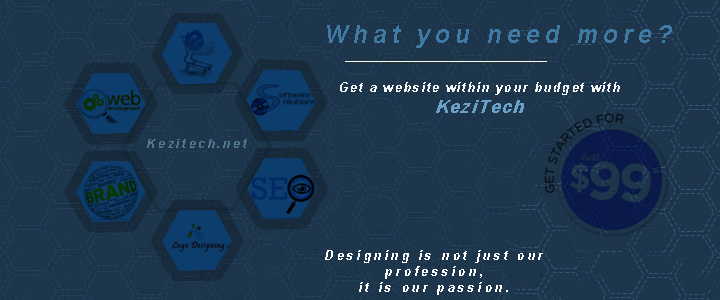
<style>
.page{position:relative;width:720px;height:300px;background:#1d364c}
.page>*{position:absolute;margin:0}
.t1{font:25px "Arial-BoldMT";letter-spacing:0.2em;color:#4079a1;font-style:italic}
.t2{font:13.2px "Arial-BoldMT";letter-spacing:0.1em;color:#f8f8f8;font-style:italic}
.t3{font:17.6px "Arial-BoldItalicMT";letter-spacing:0.1em;color:#6ba1c7;font-style:italic}
.t4{font:12.3px "Arial-BoldMT";letter-spacing:0.2em;color:#52768b;font-style:italic}
.t5{font:13.3px "Arial-BoldMT";letter-spacing:0.2em;color:#ffffff;font-style:italic}
</style>
<div class="page">
<p class="t1" style="left:327px;top:25px;width:345px;height:23px">What you need more?</p>
<p class="t2" style="left:340px;top:82px;width:280px;height:31px;text-align:center">Get a website within your budget with<br><span class="t3">KeziTech</span></p>
<p class="t4" style="left:147px;top:139px;width:100px;height:9px">Kezitech.net</p>
<p class="t5" style="left:325px;top:250px;width:218px;height:45px;text-align:center">Designing is not just our<br>profession,<br>it is our passion.</p>
</div>
